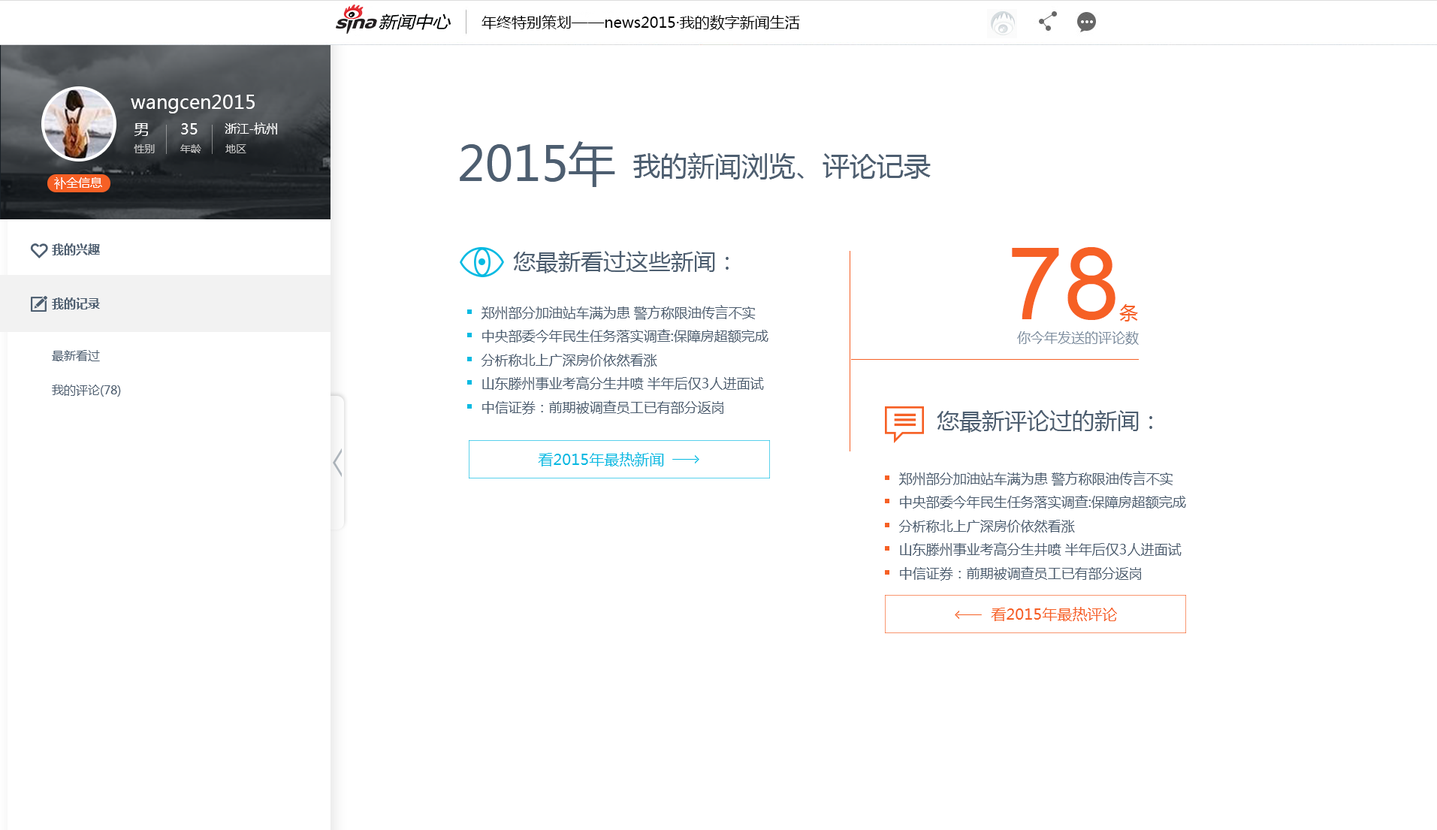
<style>
.page{position:relative;width:1437px;height:830px;background:#ffffff}
.page>*{position:absolute;margin:0}
.t1{font:15px "MicrosoftYaHei";color:#000000}
.t2{font:18.8px "MicrosoftYaHei";color:#ffffff}
.t3{font:10.5px/21.8px "MicrosoftYaHei";color:#c2c2c2}
.t4{font:15px/21.8px "MicrosoftYaHei";color:#ffffff}
.t5{font:12px "MicrosoftYaHei";color:#ffffff}
.t6{font:10.5px "MicrosoftYaHei";color:#c2c2c2}
.t7{font:15px "MicrosoftYaHei";color:#ffffff}
.t8{font:47.3px "MicrosoftYaHei";color:#4d5e70}
.t9{font:27px "MicrosoftYaHei";color:#4d5e70}
.t10{font:12px "MicrosoftYaHei-Bold";color:#4d5e70}
.t11{font:22.5px "MicrosoftYaHei";color:#4d5e70}
.t12{font:100.6px "ArialMT";color:#f66025}
.t13{font:18.8px "MicrosoftYaHei";color:#f66025}
.t14{font:13.5px "MicrosoftYaHei";color:#4d5e70}
.t15{font:22.5px "MicrosoftYaHei-Bold";color:#4d5e70}
.t16{font:13.5px "MicrosoftYaHei";color:#7e8e9f}
.t17{font:12px "MicrosoftYaHei";color:#4d5e70}
.t18{font:15px "MicrosoftYaHei";color:#06bae2}
.t19{font:15px "MicrosoftYaHei";color:#f66025}
</style>
<div class="page">
<p class="t1" style="left:481px;top:15px;width:319px;height:15px">年终特别策划——news2015·我的数字新闻生活</p>
<p class="t2" style="left:131px;top:95px;width:124px;height:18px">wangcen2015</p>
<p class="t3" style="left:134px;top:123px;width:21px;height:30px"><span class="t4">男<br></span>性别</p>
<p class="t4" style="left:180px;top:123px;width:21px;height:30px">35<br><span class="t3">年龄</span></p>
<p class="t5" style="left:225px;top:122px;width:52px;height:12px">浙江-杭州</p>
<p class="t6" style="left:225px;top:144px;width:21px;height:9px"><span class="t7"><br></span>地区</p>
<p class="t8" style="left:460px;top:141px;width:155px;height:46px">2015年</p>
<p class="t9" style="left:633px;top:152px;width:298px;height:28px">我的新闻浏览、评论记录</p>
<p class="t5" style="left:54px;top:177px;width:48px;height:12px">补全信息</p>
<p class="t10" style="left:52px;top:243px;width:48px;height:12px">我的兴趣</p>
<p class="t11" style="left:513px;top:251px;width:216px;height:22px">您最新看过这些新闻：</p>
<p class="t12" style="left:1012px;top:247px;width:126px;height:74px">78<span class="t13">条</span></p>
<p class="t10" style="left:52px;top:297px;width:48px;height:12px">我的记录</p>
<p class="t14" style="left:481px;top:305px;width:287px;height:110px"><span class="t15"><br></span>郑州部分加油站车满为患 警方称限油传言不实<br>中央部委今年民生任务落实调查:保障房超额完成<br>分析称北上广深房价依然看涨<br>山东滕州事业考高分生井喷 半年后仅3人进面试<br>中信证券：前期被调查员工已有部分返岗</p>
<p class="t16" style="left:1017px;top:331px;width:122px;height:14px">你今年发送的评论数</p>
<p class="t17" style="left:52px;top:350px;width:48px;height:11px">最新看过</p>
<p class="t17" style="left:52px;top:385px;width:69px;height:12px">我的评论(78)</p>
<p class="t11" style="left:937px;top:410px;width:215px;height:23px">您最新评论过的新闻：</p>
<p class="t18" style="left:538px;top:452px;width:126px;height:14px">看2015年最热新闻</p>
<p class="t14" style="left:899px;top:471px;width:287px;height:110px"><span class="t15"><br></span>郑州部分加油站车满为患 警方称限油传言不实<br>中央部委今年民生任务落实调查:保障房超额完成<br>分析称北上广深房价依然看涨<br>山东滕州事业考高分生井喷 半年后仅3人进面试<br>中信证券：前期被调查员工已有部分返岗</p>
<p class="t19" style="left:991px;top:607px;width:126px;height:14px">看2015年最热评论</p>
</div>
